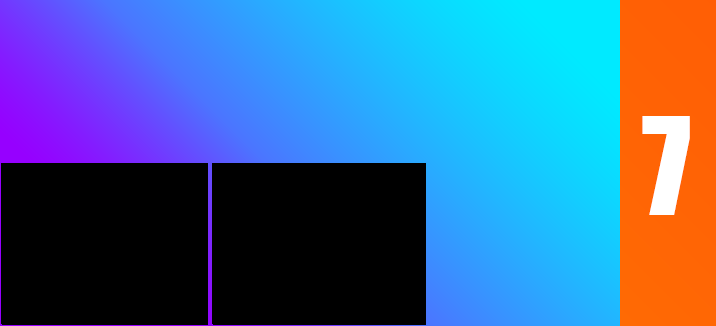
<style>
.page{position:relative;width:716px;height:326px;background:#000000}
.page>*{position:absolute;margin:0}
.t1{font:125px "Impact";color:#ffffff}
</style>
<div class="page">
<p class="t1" style="left:642px;top:116px;width:48px;height:99px">7</p>
</div>
